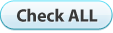
<style>
.page{position:relative;width:113px;height:33px}
.page>*{position:absolute;margin:0}
.t1{font:17.9px "MyriadPro-Bold";color:#393939}
</style>
<div class="page">
<p class="t1" style="left:17px;top:8px;width:81px;height:14px">Check ALL</p>
</div>
